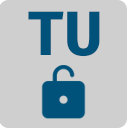
<style>
.page{position:relative;width:128px;height:128px;background:#cfcfcf}
.page>*{position:absolute;margin:0}
.t1{font:61px "FiraCodeNerdFont-Bold";color:#00527a}
</style>
<div class="page">
<p class="t1" style="left:27px;top:11px;width:74px;height:47px">TU</p>
</div>
